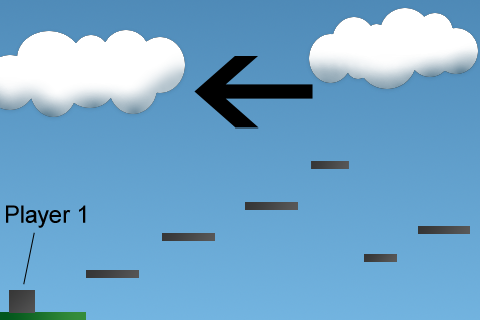
<style>
.page{position:relative;width:480px;height:320px}
.page>*{position:absolute;margin:0}
.t1{font:24px "ArialMT";color:#000000}
</style>
<div class="page">
<p class="t1" style="left:6px;top:205px;width:80px;height:23px">Player 1</p>
</div>
